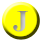
<style>
.page{position:relative;width:42px;height:42px;background:#ffffff}
.page>*{position:absolute;margin:0}
.t1{font:30px "TimesNewRomanPS-BoldMT"}
</style>
<div class="page">
<p class="t1" style="left:13px;top:11px;width:15px;height:21px">J</p>
</div>
